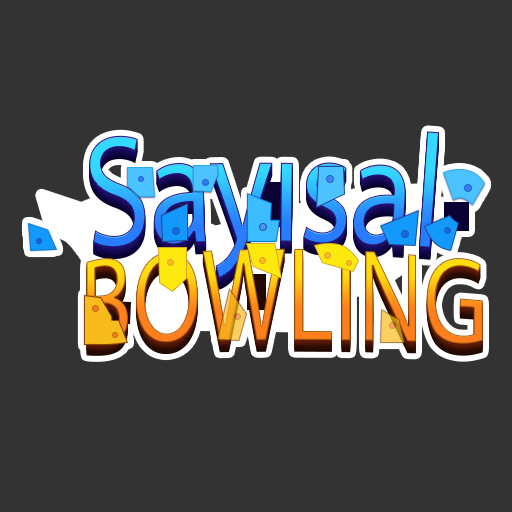
<style>
.page{position:relative;width:512px;height:512px;background:#333333}
.page>*{position:absolute;margin:0}
.t1{font:162.5px "MyriadPro-Regular";letter-spacing:-0.025em;scale:0.81 1}
.t2{font:120px "MyriadPro-Regular";scale:0.83 1}
</style>
<div class="page">
<p class="t1" style="left:89px;top:131px;width:351px;height:147px">Sayısal</p>
<p class="t2" style="left:86px;top:248px;width:397px;height:96px">BOWLING</p>
</div>
